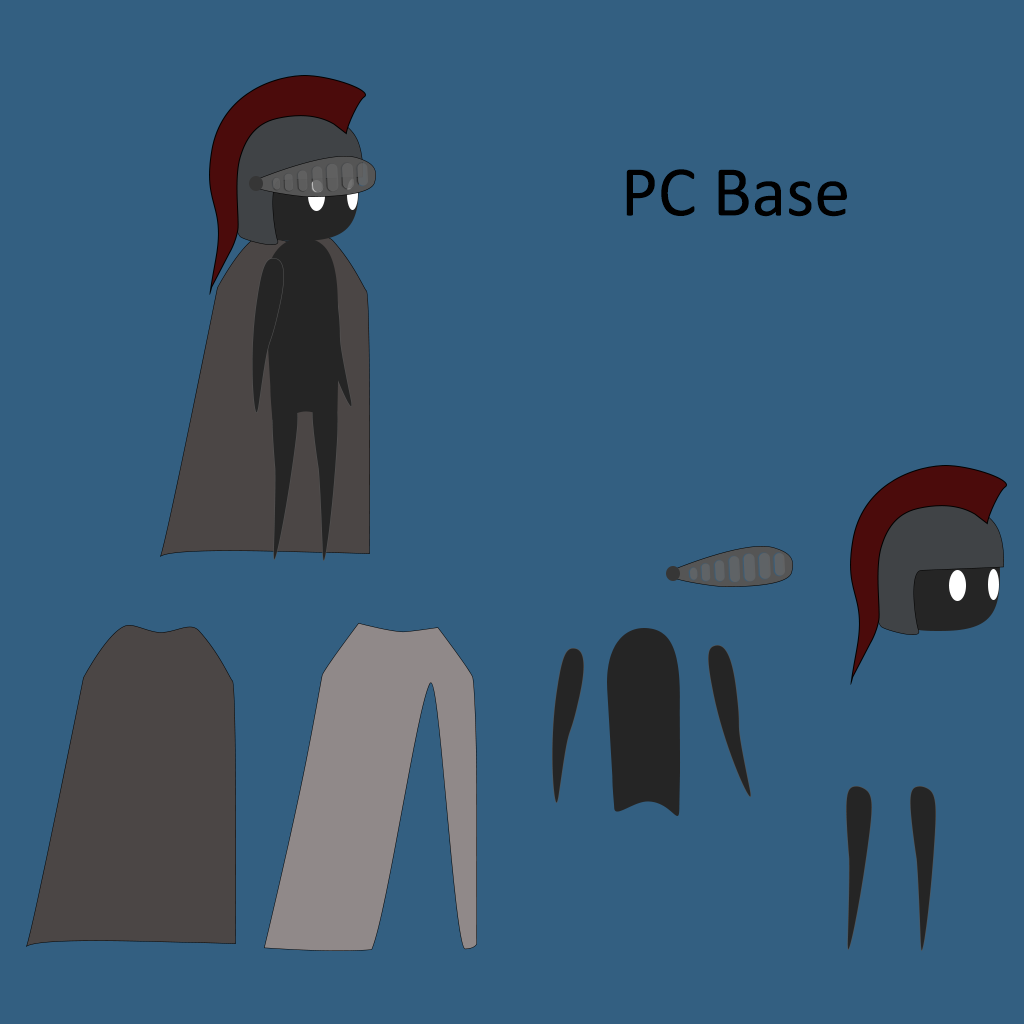
<style>
.page{position:relative;width:1024px;height:1024px;background:#335f81}
.page>*{position:absolute;margin:0}
.t1{font:72px "Calibri";color:#000000}
</style>
<div class="page">
<p class="t1" style="left:626px;top:169px;width:221px;height:48px">PC Base</p>
</div>
